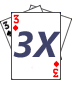
<style>
.page{position:relative;width:72px;height:93px;background:#ffffff}
.page>*{position:absolute;margin:0}
.t1{font:36px "SegoeUI-BoldItalic";color:#404369}
</style>
<div class="page">
<p class="t1" style="left:13px;top:31px;width:48px;height:27px">3X</p>
</div>
